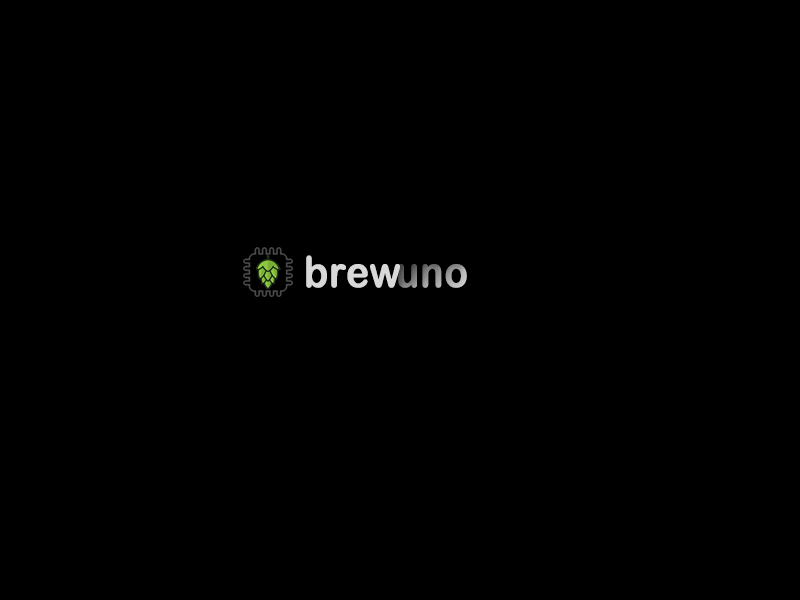
<style>
.page{position:relative;width:800px;height:600px;background:#000000}
.page>*{position:absolute;margin:0}
.t1{font:42.7px "ArialRoundedMTBold";color:#d8d8d8;font-weight:bold;scale:0.9 1}
.t2{font:42.7px "ArialRoundedMTBold";font-weight:bold;scale:0.9 1}
</style>
<div class="page">
<p class="t1" style="left:306px;top:255px;width:94px;height:33px">brew</p>
<p class="t2" style="left:398px;top:264px;width:69px;height:24px">uno</p>
</div>
